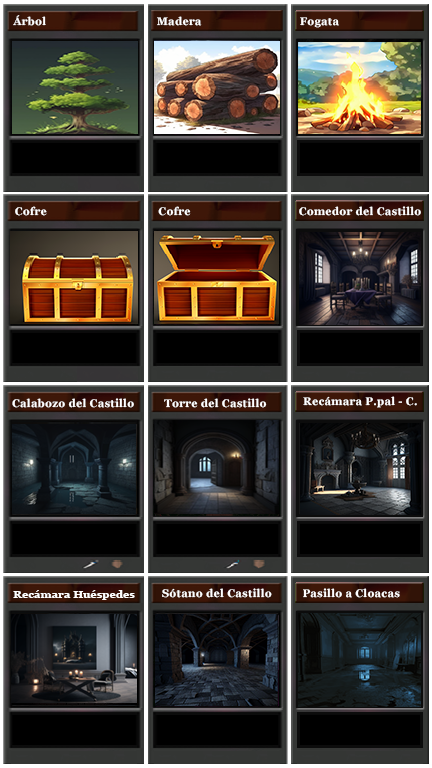
<style>
.page{position:relative;width:432px;height:768px}
.page>*{position:absolute;margin:0}
.t1{font:10.8px "Georgia-Bold";letter-spacing:0.025em;color:#ffffff}
.t2{font:10.4px "Georgia-Bold";letter-spacing:0.025em;color:#ffffff}
</style>
<div class="page">
<p class="t1" style="left:13px;top:15px;width:33px;height:11px">Árbol</p>
<p class="t1" style="left:157px;top:16px;width:45px;height:10px">Madera</p>
<p class="t1" style="left:300px;top:17px;width:39px;height:11px">Fogata</p>
<p class="t1" style="left:15px;top:206px;width:32px;height:10px">Cofre</p>
<p class="t1" style="left:158px;top:206px;width:33px;height:10px">Cofre</p>
<p class="t1" style="left:299px;top:206px;width:122px;height:10px">Comedor del Castillo</p>
<p class="t1" style="left:12px;top:398px;width:122px;height:10px">Calabozo del Castillo</p>
<p class="t1" style="left:164px;top:398px;width:103px;height:10px">Torre del Castillo</p>
<p class="t1" style="left:303px;top:396px;width:114px;height:12px">Recámara P.pal - C.</p>
<p class="t2" style="left:13px;top:590px;width:122px;height:10px">Recámara Huéspedes</p>
<p class="t1" style="left:162px;top:588px;width:110px;height:10px">Sótano del Castillo</p>
<p class="t1" style="left:303px;top:588px;width:97px;height:10px">Pasillo a Cloacas</p>
</div>
